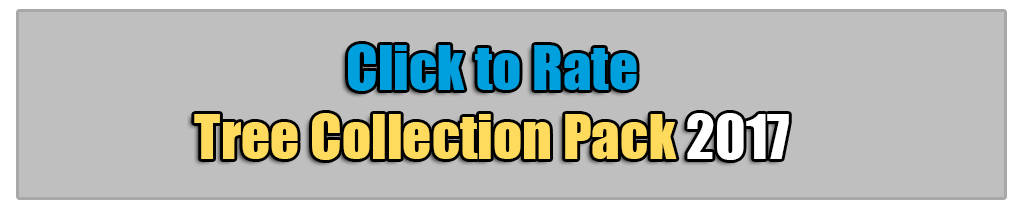
<style>
.page{position:relative;width:1024px;height:210px;background:#bfbfbf}
.page>*{position:absolute;margin:0}
.t1{font:57.3px "Impact";color:#ffdb5d}
.t2{font:57.3px "Impact";color:#009fde}
.t3{font:57.3px "Impact";color:#ffffff}
</style>
<div class="page">
<p class="t1" style="left:194px;top:44px;width:595px;height:116px;text-align:center"><span class="t2">Click to Rate<br></span>Tree Collection Pack <span class="t3">2017</span></p>
</div>
